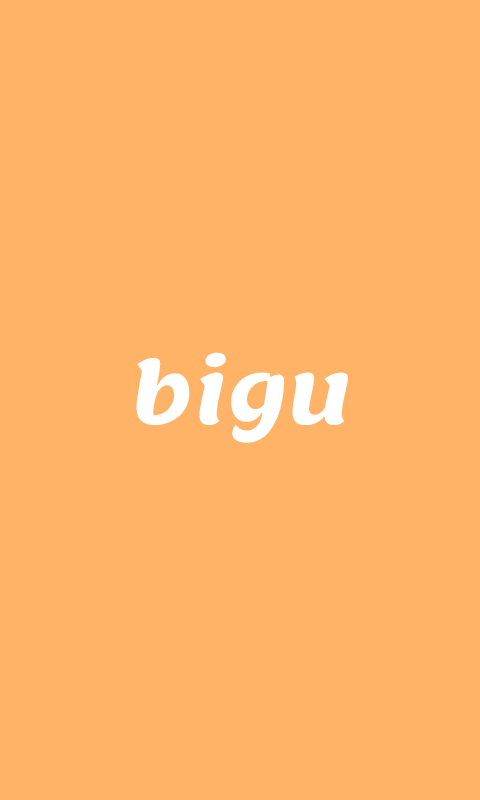
<style>
.page{position:relative;width:480px;height:800px;background:#ffb366}
.page>*{position:absolute;margin:0}
.t1{font:84px "Lemon-Regular";color:#ffffff}
</style>
<div class="page">
<p class="t1" style="left:136px;top:352px;width:212px;height:91px">bigu</p>
</div>
